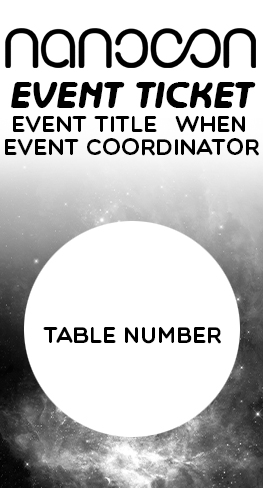
<style>
.page{position:relative;width:263px;height:488px;background:#ffffff}
.page>*{position:absolute;margin:0}
.t1{font:22.9px "Multicolore";color:#000000}
</style>
<div class="page">
<p class="t1" style="left:13px;top:116px;width:144px;height:17px">Event Title</p>
<p class="t1" style="left:175px;top:115px;width:70px;height:17px">when</p>
<p class="t1" style="left:5px;top:138px;width:254px;height:18px">event coordinator</p>
<p class="t1" style="left:43px;top:326px;width:178px;height:18px">table number</p>
</div>
